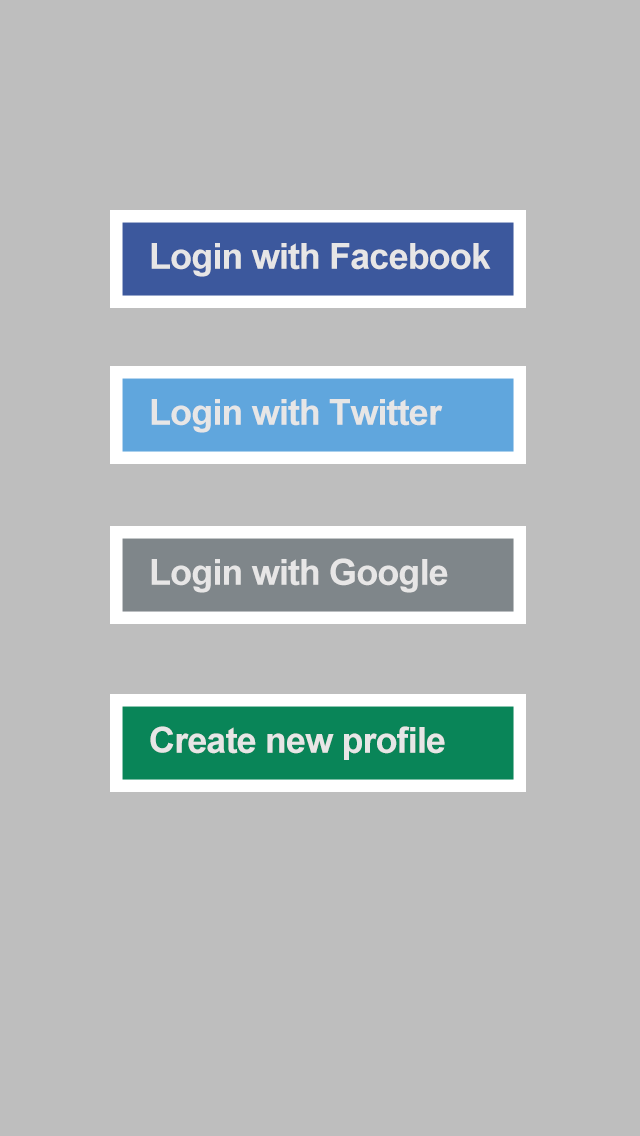
<style>
.page{position:relative;width:640px;height:1136px;background:#bebebe}
.page>*{position:absolute;margin:0}
.t1{font:36px "Arial-BoldMT";letter-spacing:-0.025em;color:#e7e6e6}
</style>
<div class="page">
<p class="t1" style="left:151px;top:243px;width:340px;height:34px">Login with Facebook</p>
<p class="t1" style="left:151px;top:399px;width:292px;height:34px">Login with Twitter</p>
<p class="t1" style="left:151px;top:558px;width:297px;height:35px">Login with Google</p>
<p class="t1" style="left:150px;top:726px;width:295px;height:34px">Create new profile</p>
</div>
